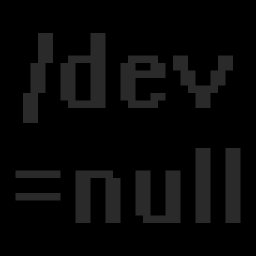
<style>
.page{position:relative;width:256px;height:256px;background:#000000}
.page>*{position:absolute;margin:0}
.t1{font:96px "System";color:#2a2a2a}
</style>
<div class="page">
<p class="t1" style="left:15px;top:33px;width:226px;height:190px;text-align:center">/dev<br>=null</p>
</div>
